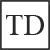
<style>
.page{position:relative;width:50px;height:50px;background:#ffffff}
.page>*{position:absolute;margin:0}
.t1{font:30.2px "TimesNewRomanPSMT";color:#282828}
</style>
<div class="page">
<p class="t1" style="left:6px;top:15px;width:38px;height:20px">TD</p>
</div>
